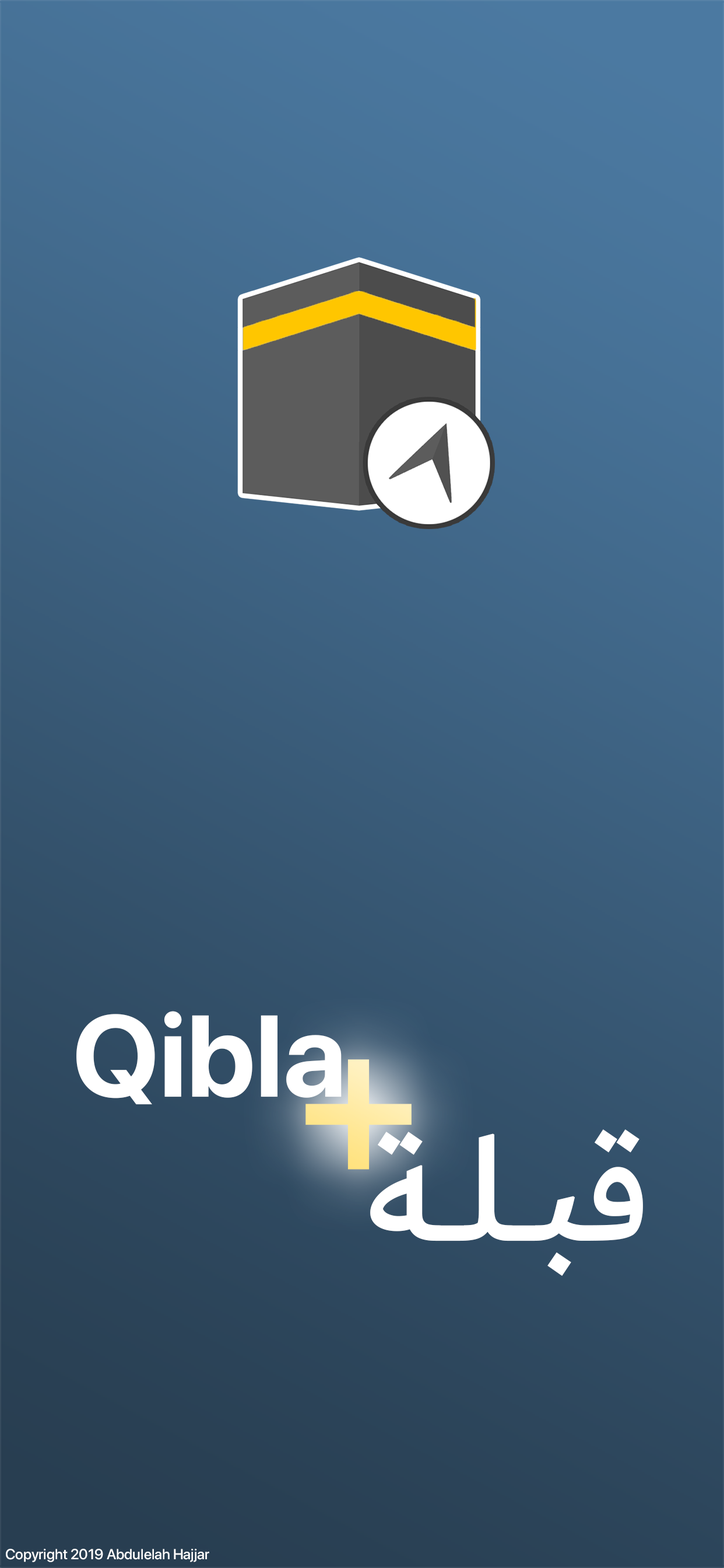
<style>
.page{position:relative;width:724px;height:1568px}
.page>*{position:absolute;margin:0}
.t1{font:155.6px/143.9px "Dubai-Medium";color:#ffffff}
.t2{font:115.2px/143.9px "SFProDisplay-Bold";color:#ffffff}
.t3{font:218.4px "SFProDisplay-Medium";color:#ffeaa1}
.t4{font:14.6px "SFProDisplay-Medium";color:#ffffff}
</style>
<div class="page">
<p class="t1" style="left:76px;top:1011px;width:567px;height:265px"><span class="t2">Qibla<br></span>قبــلــة</p>
<p class="t3" style="left:306px;top:1059px;width:106px;height:111px">+</p>
<p class="t4" style="left:6px;top:1549px;width:203px;height:13px">Copyright 2019 Abdulelah Hajjar</p>
</div>
